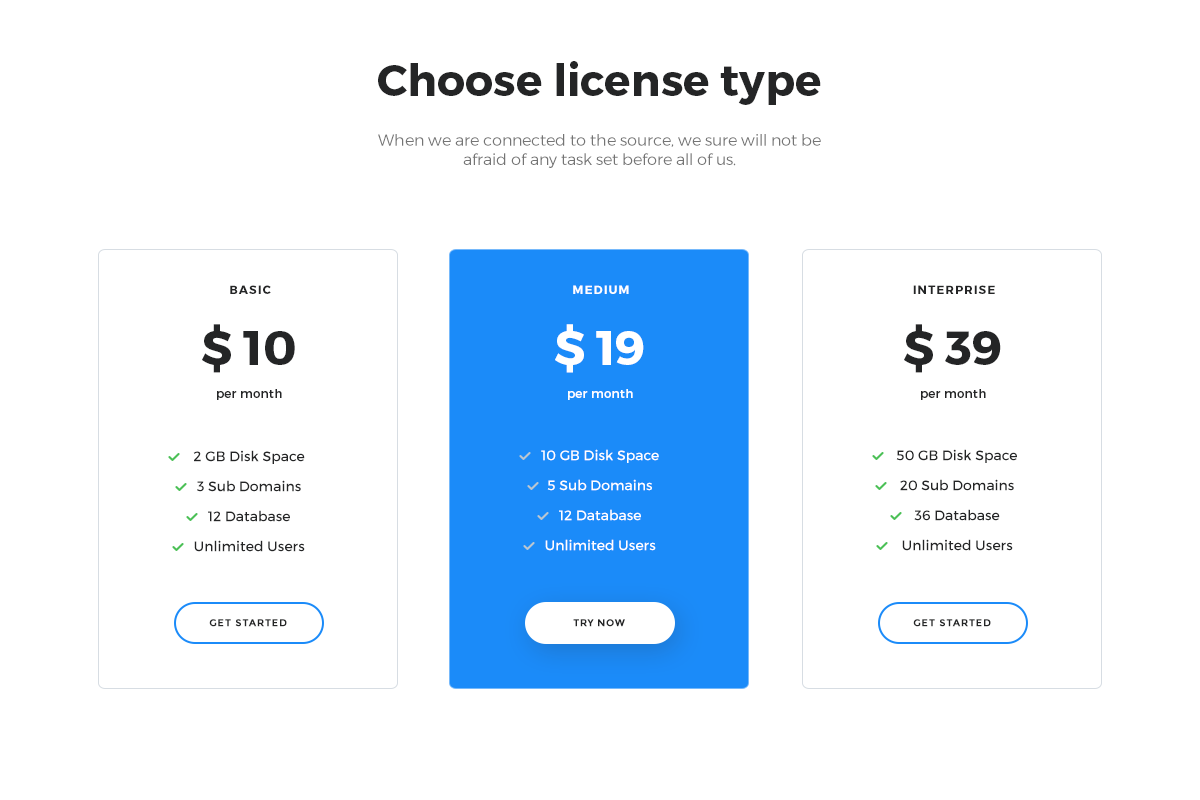
<style>
.page{position:relative;width:1200px;height:800px;background:#ffffff}
.page>*{position:absolute;margin:0}
.t1{font:44px "Montserrat-Bold";color:#242526}
.t2{font:16px "Montserrat-Light";color:#747474}
.t3{font:12px "Montserrat-Bold";letter-spacing:0.08em;color:#242526;text-transform:uppercase}
.t4{font:12px "Montserrat-Bold";letter-spacing:0.08em;color:#ffffff;text-transform:uppercase}
.t5{font:48px "Montserrat-Bold";color:#242526}
.t6{font:48px "Montserrat-Bold";color:#ffffff}
.t7{font:12px "Montserrat-Regular";letter-spacing:0.025em;color:#242526}
.t8{font:12px "Montserrat-Regular";letter-spacing:0.025em;color:#ffffff}
.t9{font:14px/30px "Montserrat-Regular";color:#ffffff}
.t10{font:14px/30px "Montserrat-Regular";color:#242526}
.t11{font:10px "Montserrat-Bold";letter-spacing:0.08em;color:#242526;text-transform:uppercase}
.t12{font:10px "Montserrat-Bold";letter-spacing:0.05em;color:#242526;text-transform:uppercase}
</style>
<div class="page">
<p class="t1" style="left:378px;top:61px;width:443px;height:44px">Choose license type</p>
<p class="t2" style="left:378px;top:134px;width:443px;height:34px;text-align:center">When we are connected to the source, we sure will not be afraid of any task set before all of us.</p>
<p class="t3" style="left:230px;top:285px;width:41px;height:9px">basic</p>
<p class="t4" style="left:573px;top:285px;width:56px;height:9px">medium</p>
<p class="t3" style="left:913px;top:285px;width:82px;height:9px">interprise</p>
<p class="t5" style="left:202px;top:324px;width:93px;height:49px">$ 10</p>
<p class="t6" style="left:555px;top:324px;width:89px;height:49px">$ 19</p>
<p class="t5" style="left:904px;top:324px;width:97px;height:49px">$ 39</p>
<p class="t7" style="left:217px;top:389px;width:65px;height:11px">per month</p>
<p class="t8" style="left:568px;top:389px;width:65px;height:11px">per month</p>
<p class="t7" style="left:921px;top:389px;width:65px;height:11px">per month</p>
<p class="t9" style="left:541px;top:449px;width:118px;height:102px;text-align:center">10 GB Disk Space<br>5 Sub Domains<br>12 Database<br>Unlimited Users</p>
<p class="t10" style="left:896px;top:449px;width:121px;height:102px;text-align:center">50 GB Disk Space<br>20 Sub Domains<br>36 Database<br>Unlimited Users</p>
<p class="t10" style="left:193px;top:450px;width:112px;height:102px;text-align:center">2 GB Disk Space<br>3 Sub Domains<br>12 Database<br>Unlimited Users</p>
<p class="t11" style="left:209px;top:619px;width:78px;height:8px">get started</p>
<p class="t12" style="left:573px;top:619px;width:52px;height:8px">try now</p>
<p class="t11" style="left:913px;top:619px;width:78px;height:8px">get started</p>
</div>
